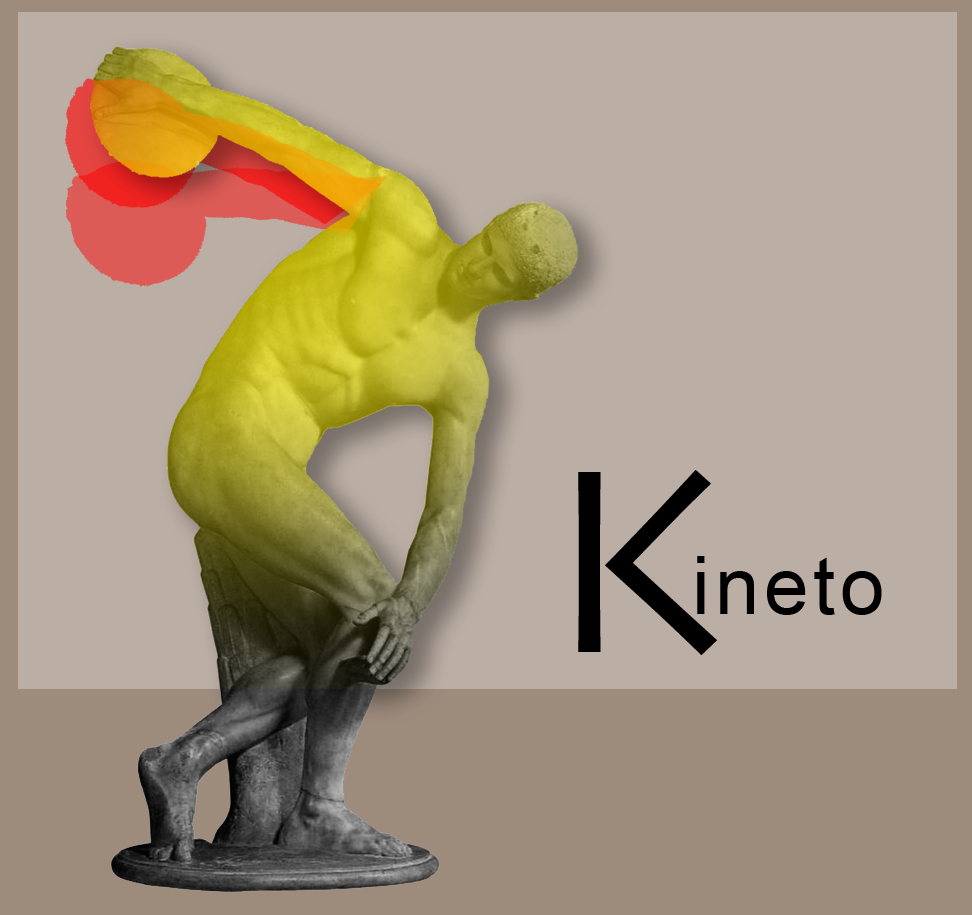
<style>
.page{position:relative;width:972px;height:915px;background:#bbaea4}
.page>*{position:absolute;margin:0}
.t1{font:274.6px "Skia-Regular";letter-spacing:0.06em;color:#000000}
.t2{font:80px "ArialMT";letter-spacing:0.06em;color:#000000}
</style>
<div class="page">
<p class="t1" style="left:578px;top:470px;width:139px;height:185px">K</p>
<p class="t2" style="left:697px;top:556px;width:185px;height:59px">ineto</p>
</div>
